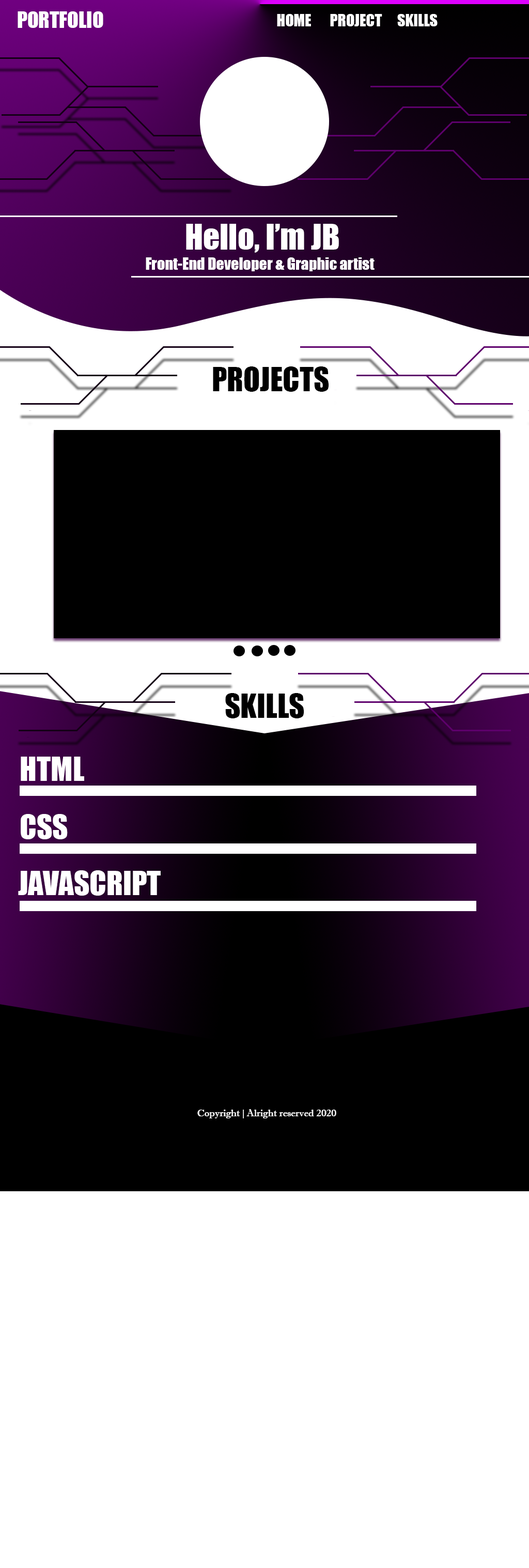
<style>
.page{position:relative;width:529px;height:1568px;background:#ffffff}
.page>*{position:absolute;margin:0}
.t1{font:20.7px "Impact";color:#ffffff}
.t2{font:15.5px "Impact";color:#ffffff}
.t3{font:15.6px "Impact";color:#ffffff}
.t4{font:32.7px "Impact";color:#ffffff}
.t5{font:30.5px "Impact";color:#000000}
.t6{font:30.4px "Impact";color:#000000}
.t7{font:30.5px "Impact";color:#ffffff}
.t8{font:9.8px "ImprintMT-Shadow";color:#fcfcfc}
</style>
<div class="page">
<p class="t1" style="left:18px;top:11px;width:85px;height:17px">PORTFOLIO</p>
<p class="t2" style="left:277px;top:14px;width:34px;height:12px">HOME</p>
<p class="t2" style="left:330px;top:14px;width:52px;height:12px">PROJECT</p>
<p class="t3" style="left:397px;top:14px;width:41px;height:12px">SKILLS</p>
<p class="t4" style="left:186px;top:224px;width:153px;height:29px">Hello, I’m JB</p>
<p class="t2" style="left:146px;top:257px;width:229px;height:14px">Front-End Developer &amp; Graphic artist</p>
<p class="t5" style="left:213px;top:366px;width:116px;height:26px">PROJECTS</p>
<p class="t6" style="left:225px;top:693px;width:79px;height:25px">SKILLS</p>
<p class="t7" style="left:21px;top:814px;width:47px;height:25px">CSS</p>
<p class="t7" style="left:18px;top:870px;width:143px;height:26px">JAVASCRIPT</p>
<p class="t8" style="left:197px;top:1109px;width:139px;height:9px">Copyright | Alright reserved 2020</p>
</div>
